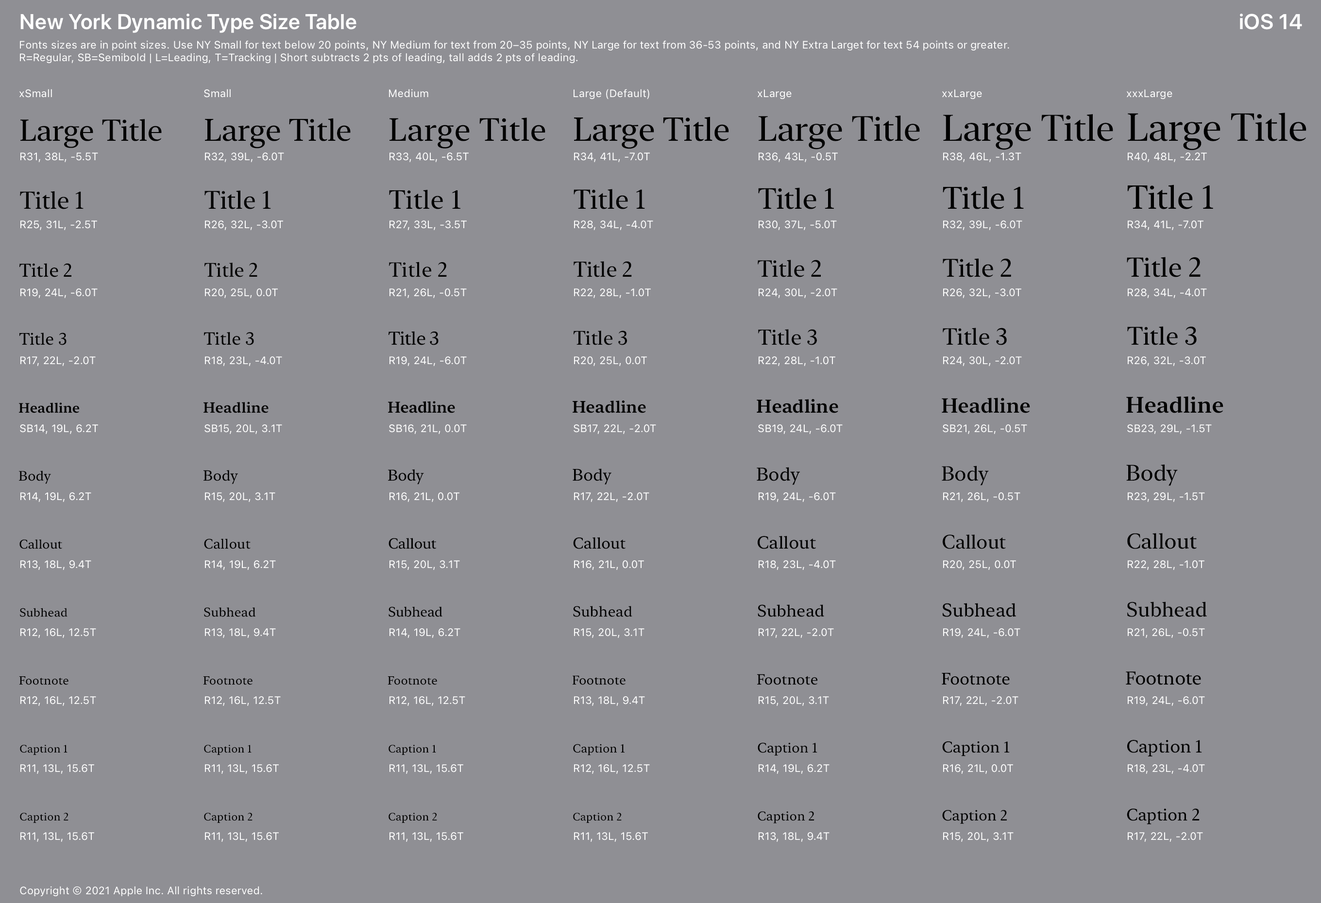
<style>
.page{position:relative;width:1321px;height:903px;background:#8f8f94}
.page>*{position:absolute;margin:0}
.t1{font:21.4px "SFProDisplay-Semibold";letter-spacing:0.016em;color:#ffffff}
.t2{font:10.7px/12.6px "SFProText-Regular";letter-spacing:0.006em;color:#ffffff}
.t3{font:10.7px "SFProText-Regular";letter-spacing:0.013em;color:#ffffff}
.t4{font:38.8px "NewYorkLarge-Regular";letter-spacing:-0.002em;color:#000000}
.t5{font:30.1px "NewYorkMedium-Regular";letter-spacing:-0.006em;color:#000000}
.t6{font:31.1px "NewYorkMedium-Regular";letter-spacing:-0.006em;color:#000000}
.t7{font:32px "NewYorkMedium-Regular";letter-spacing:0.011em;color:#000000}
.t8{font:33px "NewYorkMedium-Regular";letter-spacing:-0.007em;color:#000000}
.t9{font:35px "NewYorkLarge-Regular";color:#000000}
.t10{font:36.9px "NewYorkLarge-Regular";letter-spacing:-0.001em;color:#000000}
.t11{font:10.7px/68px "SFProText-Regular";letter-spacing:0.006em;color:#ffffff}
.t12{font:24.3px "NewYorkMedium-Regular";letter-spacing:-0.003em;color:#000000}
.t13{font:25.2px "NewYorkMedium-Regular";letter-spacing:-0.003em;color:#000000}
.t14{font:26.2px "NewYorkMedium-Regular";letter-spacing:0.013em;color:#000000}
.t15{font:27.2px "NewYorkMedium-Regular";letter-spacing:-0.004em;color:#000000}
.t16{font:29.1px "NewYorkMedium-Regular";letter-spacing:-0.005em;color:#000000}
.t17{font:18.4px "NewYorkSmall-Regular";color:#000000}
.t18{font:19.4px "NewYorkMedium-Regular";color:#000000}
.t19{font:20.4px "NewYorkMedium-Regular";letter-spacing:0.017em;color:#000000}
.t20{font:21.4px "NewYorkMedium-Regular";letter-spacing:-0.001em;color:#000000}
.t21{font:23.3px "NewYorkMedium-Regular";letter-spacing:-0.002em;color:#000000}
.t22{font:16.5px "NewYorkSmall-Regular";letter-spacing:-0.006em;color:#000000}
.t23{font:17.5px "NewYorkSmall-Regular";letter-spacing:-0.004em;color:#000000}
.t24{font:18.4px "NewYorkSmall-Regular";letter-spacing:-0.026em;color:#000000}
.t25{font:14.6px "NewYorkSmall-Semibold";letter-spacing:0.003em;color:#000000}
.t26{font:15.5px "NewYorkSmall-Semibold";letter-spacing:-0.02em;color:#000000}
.t27{font:16.5px "NewYorkSmall-Semibold";letter-spacing:-0.002em;color:#000000}
.t28{font:18.4px "NewYorkSmall-Semibold";letter-spacing:-0.006em;color:#000000}
.t29{font:20.4px "NewYorkMedium-Semibold";color:#000000}
.t30{font:22.3px "NewYorkMedium-Semibold";letter-spacing:0.002em;color:#000000}
.t31{font:13.6px "NewYorkSmall-Semibold";color:#000000}
.t32{font:13.6px "NewYorkSmall-Regular";color:#000000}
.t33{font:14.6px "NewYorkSmall-Regular";letter-spacing:0.003em;color:#000000}
.t34{font:15.5px "NewYorkSmall-Regular";letter-spacing:-0.02em;color:#000000}
.t35{font:16.5px "NewYorkSmall-Regular";letter-spacing:-0.002em;color:#000000}
.t36{font:18.4px "NewYorkSmall-Regular";letter-spacing:-0.006em;color:#000000}
.t37{font:20.4px "NewYorkMedium-Regular";color:#000000}
.t38{font:22.3px "NewYorkMedium-Regular";letter-spacing:-0.001em;color:#000000}
.t39{font:12.6px "NewYorkSmall-Regular";letter-spacing:0.003em;color:#000000}
.t40{font:13.6px "NewYorkSmall-Regular";letter-spacing:0.006em;color:#000000}
.t41{font:14.6px "NewYorkSmall-Regular";letter-spacing:-0.016em;color:#000000}
.t42{font:15.5px "NewYorkSmall-Regular";color:#000000}
.t43{font:20.4px "NewYorkMedium-Regular";letter-spacing:0.001em;color:#000000}
.t44{font:11.7px "NewYorkSmall-Regular";letter-spacing:0.006em;color:#000000}
.t45{font:12.6px "NewYorkSmall-Regular";letter-spacing:0.009em;color:#000000}
.t46{font:13.6px "NewYorkSmall-Regular";letter-spacing:-0.011em;color:#000000}
.t47{font:11.7px "NewYorkSmall-Regular";letter-spacing:0.013em;color:#000000}
.t48{font:10.7px "NewYorkSmall-Regular";letter-spacing:0.016em;color:#000000}
.t49{font:10.7px "SFProText-Regular";letter-spacing:0.006em;color:#ffffff}
</style>
<div class="page">
<p class="t1" style="left:20px;top:14px;width:336px;height:19px">New York Dynamic Type Size Table</p>
<p class="t1" style="left:1239px;top:14px;width:63px;height:16px">iOS 14</p>
<p class="t2" style="left:20px;top:40px;width:989px;height:24px">Fonts sizes are in point sizes. Use NY Small for text below 20 points, NY Medium for text from 20–35 points, NY Large for text from 36-53 points, and NY Extra Larget for text 54 points or greater. <br>R=Regular, SB=Semibold | L=Leading, T=Tracking | Short subtracts 2 pts of leading, tall adds 2 pts of leading.</p>
<p class="t3" style="left:19px;top:89px;width:33px;height:9px">xSmall</p>
<p class="t3" style="left:204px;top:89px;width:27px;height:9px">Small</p>
<p class="t3" style="left:389px;top:89px;width:39px;height:9px">Medium</p>
<p class="t3" style="left:573px;top:89px;width:76px;height:10px">Large (Default)</p>
<p class="t3" style="left:757px;top:89px;width:34px;height:10px">xLarge</p>
<p class="t3" style="left:941px;top:89px;width:41px;height:10px">xxLarge</p>
<p class="t3" style="left:1126px;top:89px;width:46px;height:11px">xxxLarge</p>
<p class="t4" style="left:1127px;top:113px;width:179px;height:38px">Large Title</p>
<p class="t5" style="left:20px;top:119px;width:142px;height:29px">Large Title</p>
<p class="t6" style="left:205px;top:118px;width:146px;height:31px">Large Title</p>
<p class="t7" style="left:389px;top:117px;width:156px;height:32px">Large Title</p>
<p class="t8" style="left:574px;top:117px;width:155px;height:32px">Large Title</p>
<p class="t9" style="left:758px;top:116px;width:162px;height:34px">Large Title</p>
<p class="t10" style="left:943px;top:114px;width:170px;height:36px">Large Title</p>
<p class="t11" style="left:20px;top:152px;width:78px;height:690px">R31, 38L, -5.5T<br>R25, 31L, -2.5T<br>R19, 24L, -6.0T<br>R17, 22L, -2.0T<br>SB14, 19L, 6.2T<br>R14, 19L, 6.2T<br>R13, 18L, 9.4T<br>R12, 16L, 12.5T<br>R12, 16L, 12.5T<br>R11, 13L, 15.6T<br>R11, 13L, 15.6T</p>
<p class="t11" style="left:204px;top:152px;width:80px;height:690px">R32, 39L, -6.0T<br>R26, 32L, -3.0T<br>R20, 25L, 0.0T<br>R18, 23L, -4.0T<br>SB15, 20L, 3.1T<br>R15, 20L, 3.1T<br>R14, 19L, 6.2T<br>R13, 18L, 9.4T<br>R12, 16L, 12.5T<br>R11, 13L, 15.6T<br>R11, 13L, 15.6T</p>
<p class="t11" style="left:389px;top:152px;width:79px;height:690px">R33, 40L, -6.5T<br>R27, 33L, -3.5T<br>R21, 26L, -0.5T<br>R19, 24L, -6.0T<br>SB16, 21L, 0.0T<br>R16, 21L, 0.0T<br>R15, 20L, 3.1T<br>R14, 19L, 6.2T<br>R12, 16L, 12.5T<br>R11, 13L, 15.6T<br>R11, 13L, 15.6T</p>
<p class="t11" style="left:573px;top:152px;width:83px;height:690px">R34, 41L, -7.0T<br>R28, 34L, -4.0T<br>R22, 28L, -1.0T<br>R20, 25L, 0.0T<br>SB17, 22L, -2.0T<br>R17, 22L, -2.0T<br>R16, 21L, 0.0T<br>R15, 20L, 3.1T<br>R13, 18L, 9.4T<br>R12, 16L, 12.5T<br>R11, 13L, 15.6T</p>
<p class="t11" style="left:758px;top:152px;width:84px;height:690px">R36, 43L, -0.5T<br>R30, 37L, -5.0T<br>R24, 30L, -2.0T<br>R22, 28L, -1.0T<br>SB19, 24L, -6.0T<br>R19, 24L, -6.0T<br>R18, 23L, -4.0T<br>R17, 22L, -2.0T<br>R15, 20L, 3.1T<br>R14, 19L, 6.2T<br>R13, 18L, 9.4T</p>
<p class="t11" style="left:942px;top:152px;width:85px;height:690px">R38, 46L, -1.3T<br>R32, 39L, -6.0T<br>R26, 32L, -3.0T<br>R24, 30L, -2.0T<br>SB21, 26L, -0.5T<br>R21, 26L, -0.5T<br>R20, 25L, 0.0T<br>R19, 24L, -6.0T<br>R17, 22L, -2.0T<br>R16, 21L, 0.0T<br>R15, 20L, 3.1T</p>
<p class="t11" style="left:1127px;top:152px;width:84px;height:690px">R40, 48L, -2.2T<br>R34, 41L, -7.0T<br>R28, 34L, -4.0T<br>R26, 32L, -3.0T<br>SB23, 29L, -1.5T<br>R23, 29L, -1.5T<br>R22, 28L, -1.0T<br>R21, 26L, -0.5T<br>R19, 24L, -6.0T<br>R18, 23L, -4.0T<br>R17, 22L, -2.0T</p>
<p class="t6" style="left:942px;top:186px;width:81px;height:23px">Title 1</p>
<p class="t8" style="left:1127px;top:184px;width:86px;height:25px">Title 1</p>
<p class="t12" style="left:20px;top:191px;width:64px;height:18px">Title 1</p>
<p class="t13" style="left:204px;top:190px;width:67px;height:19px">Title 1</p>
<p class="t14" style="left:389px;top:190px;width:71px;height:19px">Title 1</p>
<p class="t15" style="left:573px;top:189px;width:72px;height:20px">Title 1</p>
<p class="t16" style="left:758px;top:187px;width:76px;height:22px">Title 1</p>
<p class="t15" style="left:1126px;top:257px;width:74px;height:20px">Title 2</p>
<p class="t17" style="left:19px;top:263px;width:52px;height:14px">Title 2</p>
<p class="t18" style="left:204px;top:263px;width:53px;height:14px">Title 2</p>
<p class="t19" style="left:389px;top:262px;width:58px;height:15px">Title 2</p>
<p class="t20" style="left:573px;top:261px;width:59px;height:16px">Title 2</p>
<p class="t21" style="left:757px;top:260px;width:64px;height:17px">Title 2</p>
<p class="t13" style="left:942px;top:258px;width:69px;height:19px">Title 2</p>
<p class="t20" style="left:758px;top:329px;width:59px;height:16px">Title 3</p>
<p class="t21" style="left:942px;top:328px;width:64px;height:17px">Title 3</p>
<p class="t13" style="left:1127px;top:326px;width:69px;height:19px">Title 3</p>
<p class="t22" style="left:19px;top:333px;width:48px;height:12px">Title 3</p>
<p class="t23" style="left:204px;top:332px;width:50px;height:13px">Title 3</p>
<p class="t24" style="left:388px;top:331px;width:50px;height:14px">Title 3</p>
<p class="t18" style="left:573px;top:331px;width:54px;height:14px">Title 3</p>
<p class="t25" style="left:203px;top:401px;width:65px;height:12px">Headline</p>
<p class="t26" style="left:388px;top:401px;width:67px;height:12px">Headline</p>
<p class="t27" style="left:572px;top:400px;width:74px;height:13px">Headline</p>
<p class="t28" style="left:756px;top:399px;width:82px;height:14px">Headline</p>
<p class="t29" style="left:941px;top:398px;width:89px;height:15px">Headline</p>
<p class="t30" style="left:1126px;top:396px;width:97px;height:17px">Headline</p>
<p class="t31" style="left:19px;top:402px;width:60px;height:11px">Headline</p>
<p class="t32" style="left:19px;top:470px;width:32px;height:14px">Body</p>
<p class="t33" style="left:203px;top:470px;width:35px;height:14px">Body</p>
<p class="t34" style="left:388px;top:469px;width:36px;height:16px">Body</p>
<p class="t35" style="left:572px;top:468px;width:39px;height:17px">Body</p>
<p class="t36" style="left:756px;top:467px;width:44px;height:18px">Body</p>
<p class="t37" style="left:941px;top:466px;width:47px;height:19px">Body</p>
<p class="t38" style="left:1126px;top:464px;width:51px;height:22px">Body</p>
<p class="t20" style="left:1127px;top:533px;width:69px;height:16px">Callout</p>
<p class="t39" style="left:19px;top:539px;width:43px;height:10px">Callout</p>
<p class="t40" style="left:204px;top:538px;width:47px;height:11px">Callout</p>
<p class="t41" style="left:388px;top:538px;width:48px;height:11px">Callout</p>
<p class="t42" style="left:573px;top:537px;width:52px;height:12px">Callout</p>
<p class="t23" style="left:757px;top:536px;width:59px;height:13px">Callout</p>
<p class="t18" style="left:942px;top:535px;width:63px;height:14px">Callout</p>
<p class="t33" style="left:573px;top:606px;width:59px;height:11px">Subhead</p>
<p class="t35" style="left:757px;top:604px;width:67px;height:13px">Subhead</p>
<p class="t36" style="left:942px;top:603px;width:74px;height:14px">Subhead</p>
<p class="t43" style="left:1127px;top:602px;width:79px;height:15px">Subhead</p>
<p class="t44" style="left:20px;top:608px;width:47px;height:9px">Subhead</p>
<p class="t45" style="left:204px;top:607px;width:51px;height:10px">Subhead</p>
<p class="t46" style="left:388px;top:606px;width:54px;height:11px">Subhead</p>
<p class="t47" style="left:19px;top:676px;width:49px;height:9px">Footnote</p>
<p class="t47" style="left:203px;top:676px;width:49px;height:9px">Footnote</p>
<p class="t47" style="left:387px;top:676px;width:50px;height:9px">Footnote</p>
<p class="t45" style="left:572px;top:675px;width:53px;height:10px">Footnote</p>
<p class="t33" style="left:757px;top:674px;width:61px;height:11px">Footnote</p>
<p class="t35" style="left:941px;top:673px;width:68px;height:12px">Footnote</p>
<p class="t36" style="left:1125px;top:671px;width:76px;height:14px">Footnote</p>
<p class="t48" style="left:20px;top:745px;width:47px;height:10px">Caption 1</p>
<p class="t48" style="left:204px;top:745px;width:47px;height:10px">Caption 1</p>
<p class="t48" style="left:388px;top:745px;width:48px;height:10px">Caption 1</p>
<p class="t47" style="left:573px;top:744px;width:51px;height:11px">Caption 1</p>
<p class="t40" style="left:757px;top:742px;width:60px;height:14px">Caption 1</p>
<p class="t42" style="left:942px;top:741px;width:67px;height:15px">Caption 1</p>
<p class="t23" style="left:1127px;top:740px;width:75px;height:16px">Caption 1</p>
<p class="t33" style="left:942px;top:810px;width:64px;height:14px">Caption 2</p>
<p class="t35" style="left:1126px;top:808px;width:73px;height:16px">Caption 2</p>
<p class="t48" style="left:20px;top:813px;width:48px;height:10px">Caption 2</p>
<p class="t48" style="left:204px;top:813px;width:48px;height:10px">Caption 2</p>
<p class="t48" style="left:388px;top:813px;width:49px;height:10px">Caption 2</p>
<p class="t48" style="left:573px;top:813px;width:48px;height:10px">Caption 2</p>
<p class="t45" style="left:757px;top:811px;width:57px;height:12px">Caption 2</p>
<p class="t49" style="left:20px;top:886px;width:242px;height:11px">Copyright © 2021 Apple Inc. All rights reserved.</p>
</div>
